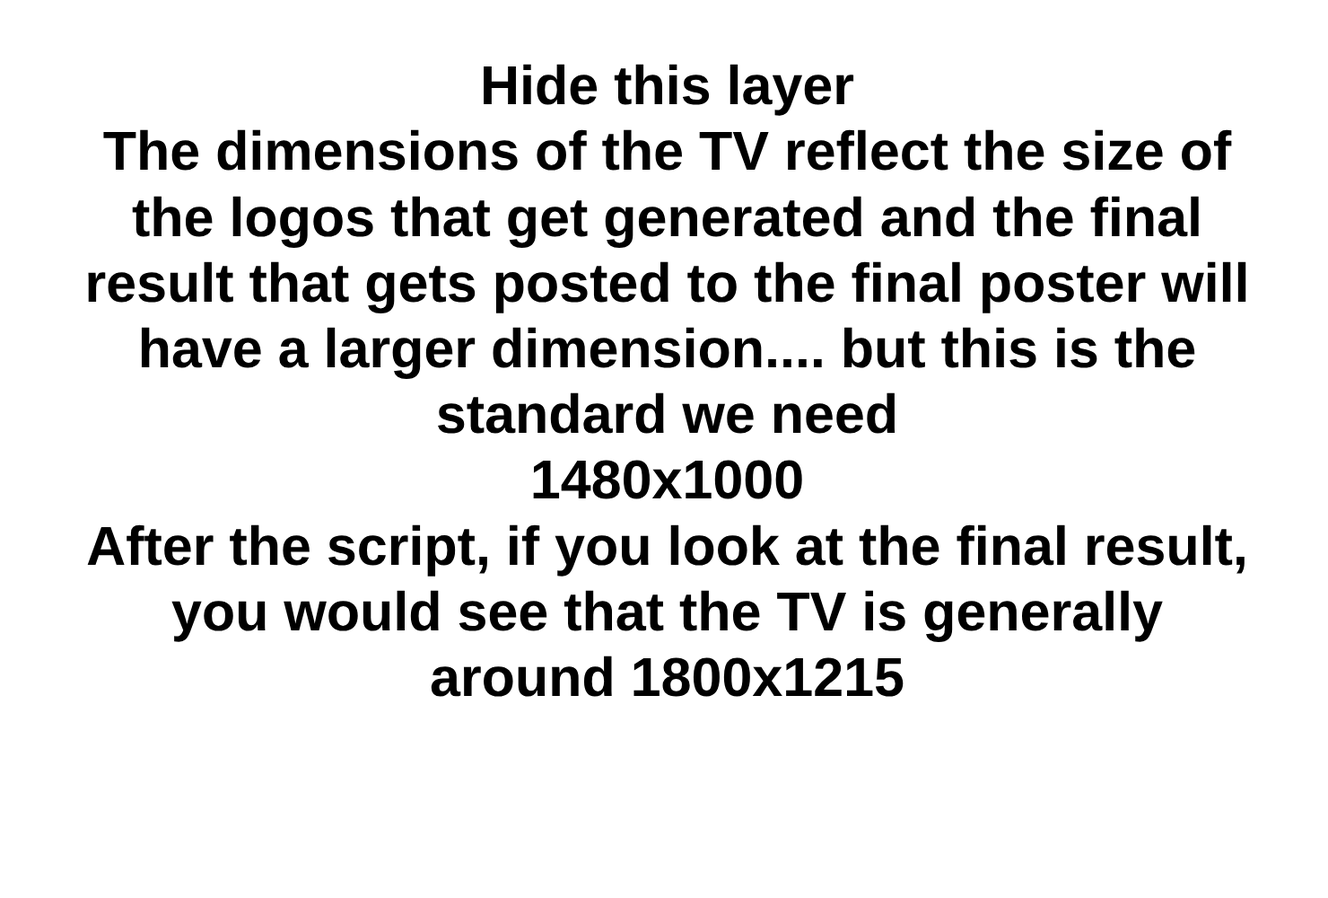
<style>
.page{position:relative;width:1328px;height:898px;background:#ffffff}
.page>*{position:absolute;margin:0}
.t1{font:54.8px "Arial-BoldMT";color:#000000}
</style>
<div class="page">
<p class="t1" style="left:87px;top:64px;width:1160px;height:633px;text-align:center">Hide this layer<br>The dimensions of the TV reflect the size of the logos that get generated and the final result that gets posted to the final poster will have a larger dimension.... but this is the standard we need<br>1480x1000<br>After the script, if you look at the final result, you would see that the TV is generally around 1800x1215</p>
</div>
